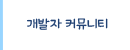
<style>
.page{position:relative;width:130px;height:50px;background:#ffffff}
.page>*{position:absolute;margin:0}
.t1{font:12.5px "THEAlien";color:#214274}
</style>
<div class="page">
<p class="t1" style="left:27px;top:18px;width:81px;height:12px">개발자 커뮤니티</p>
</div>
